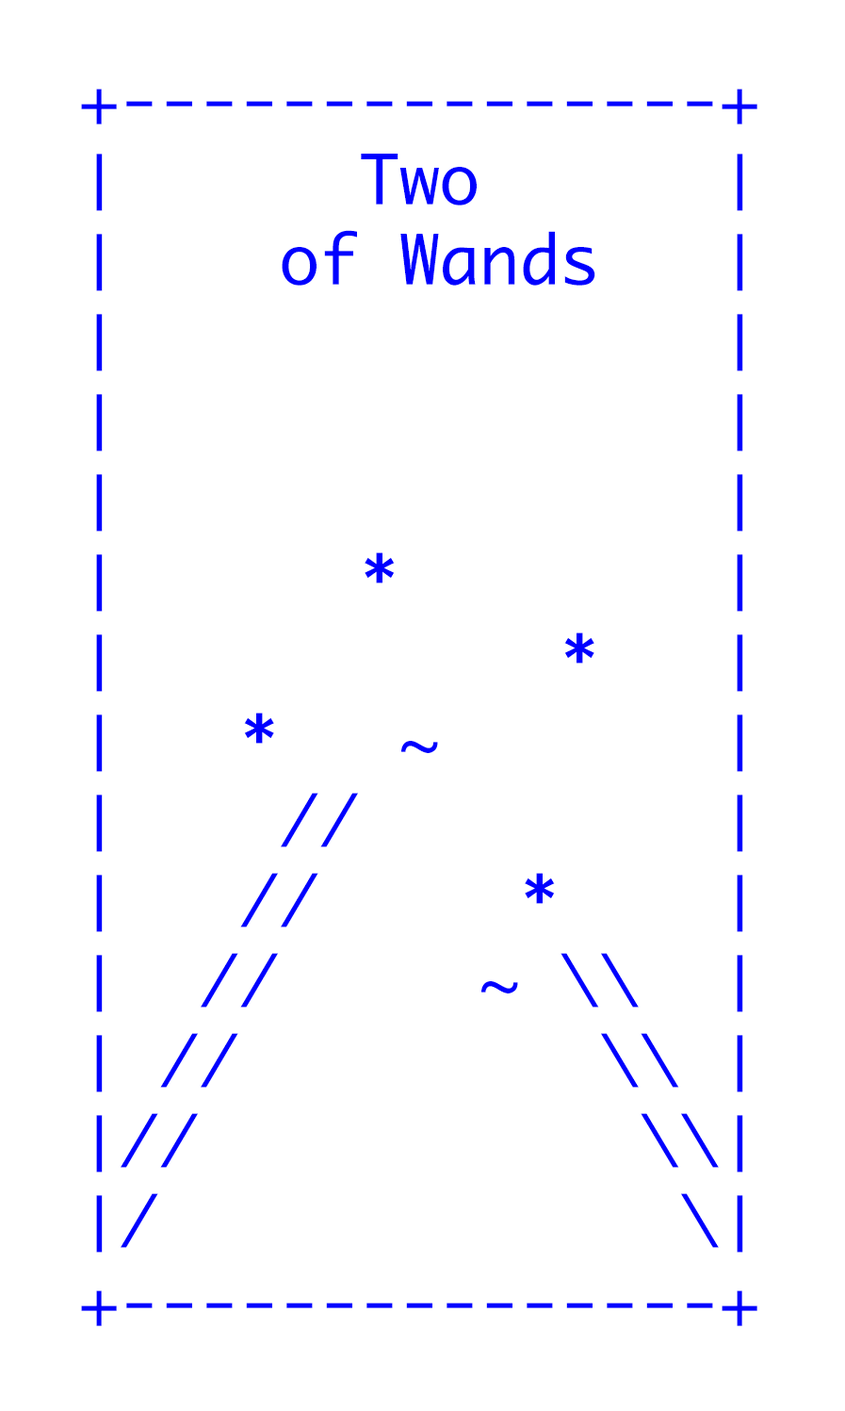
<style>
.page{position:relative;width:845px;height:1411px;background:#ffffff}
.page>*{position:absolute;margin:0}
.t1{font:66.7px "Monaco";color:#0000ff}
</style>
<div class="page">
<p class="t1" style="left:81px;top:89px;width:677px;height:1237px">+---------------+<br>│      Two      │<br>│    of Wands   │<br>│               │<br>│               │<br>│               │<br>│      *        │<br>│           *   │<br>│   *   ~       │<br>│    //         │<br>│   //     *    │ <br>│  //     ~ \\  │ <br>│ //         \\ │<br>│//           \\│<br>│/             \│<br>+---------------+</p>
</div>
